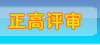
<style>
.page{position:relative;width:100px;height:45px}
.page>*{position:absolute;margin:0}
.t1{font:18px "SimHei";letter-spacing:0.04em;color:#ebe315;font-weight:bold}
</style>
<div class="page">
<p class="t1" style="left:8px;top:12px;width:73px;height:18px">正高评审</p>
</div>
